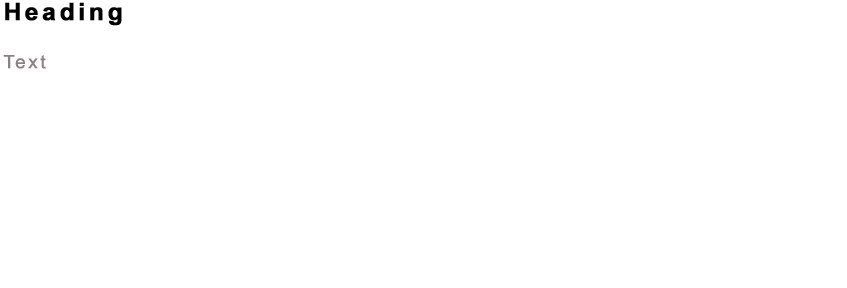
<style>
.page{position:relative;width:847px;height:288px;background:#ffffff}
.page>*{position:absolute;margin:0}
.t1{font:24px/24px "Arial-BoldMT";letter-spacing:0.14em;color:#000000;font-weight:bold}
.t2{font:18px/24px "ArialMT";letter-spacing:0.14em;color:#888282;font-weight:bold}
</style>
<div class="page">
<p class="t1" style="left:3px;top:2px;width:119px;height:67px">Heading<br><br><span class="t2">Text</span></p>
</div>
